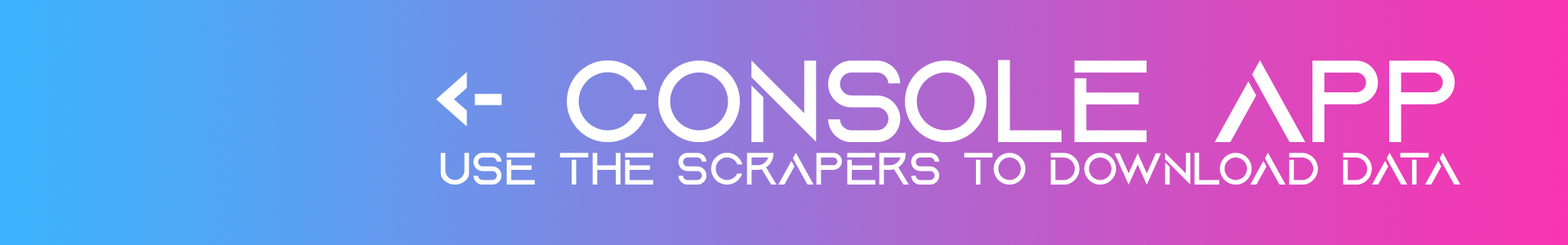
<style>
.page{position:relative;width:1568px;height:245px}
.page>*{position:absolute;margin:0}
.t1{font:122.5px "AquireRegular";color:#ffffff}
.t2{font:47.6px "AquireRegular";color:#ffffff}
</style>
<div class="page">
<p class="t1" style="left:436px;top:60px;width:1019px;height:82px">&lt;- Console App</p>
<p class="t2" style="left:440px;top:153px;width:1020px;height:32px">Use the scrapers to download data</p>
</div>
